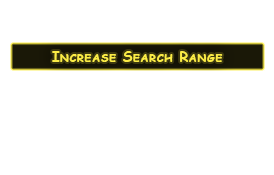
<style>
.page{position:relative;width:274px;height:175px;background:#ffffff}
.page>*{position:absolute;margin:0}
.t1{font:14.2px "ComicSansMS-Bold";color:#fbec46;font-variant:small-caps}
</style>
<div class="page">
<p class="t1" style="left:52px;top:51px;width:171px;height:11px">Increase Search Range</p>
</div>
